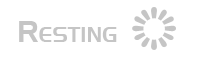
<style>
.page{position:relative;width:199px;height:57px;background:#ffffff}
.page>*{position:absolute;margin:0}
.t1{font:21px "Slicker";color:#c5c5c5}
.t2{font:30px "Slicker";color:#c5c5c5}
</style>
<div class="page">
<p class="t1" style="left:19px;top:21px;width:98px;height:21px"><span class="t2">R</span>ESTING</p>
</div>
